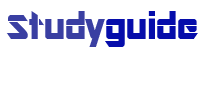
<style>
.page{position:relative;width:205px;height:90px;background:#ffffff}
.page>*{position:absolute;margin:0}
.t1{font:38.2px "ARDESTINE";color:#3a3fa2}
.t2{font:38.2px "ARDESTINE";color:#060dab}
</style>
<div class="page">
<p class="t1" style="left:6px;top:11px;width:192px;height:36px">Study<span class="t2">guide</span></p>
</div>
